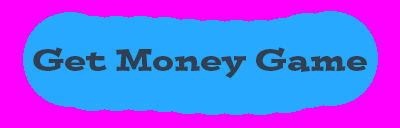
<style>
.page{position:relative;width:400px;height:128px;background:#27a9ff}
.page>*{position:absolute;margin:0}
.t1{font:30px "PostinoStd";color:#313f52}
</style>
<div class="page">
<p class="t1" style="left:33px;top:47px;width:334px;height:32px">Get Money Game</p>
</div>
